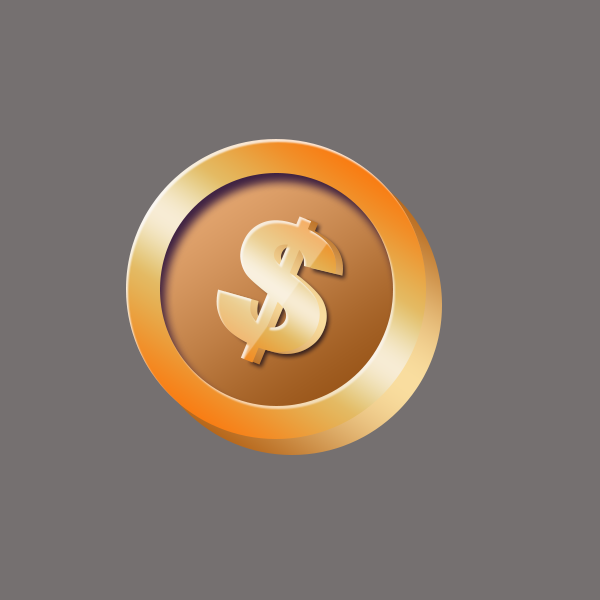
<style>
.page{position:relative;width:600px;height:600px;background:#757070}
.page>*{position:absolute;margin:0}
.t1{font:175px "Arial-Black"}
</style>
<div class="page">
<p class="t1" style="left:223px;top:218px;width:120px;height:147px;rotate:23deg">$</p>
</div>
